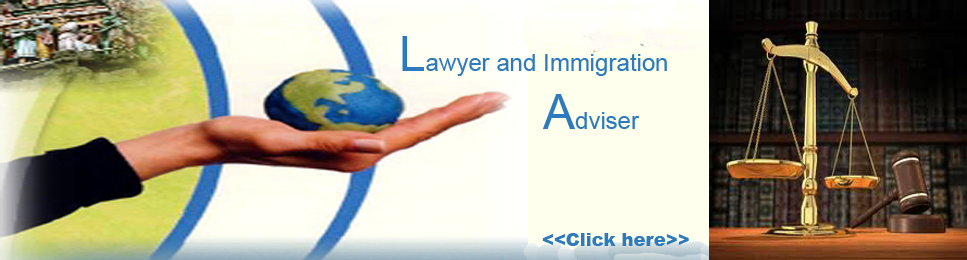
<style>
.page{position:relative;width:967px;height:260px}
.page>*{position:absolute;margin:0}
.t1{font:24px "ArialMT";color:#2d7bbe}
.t2{font:48px "ArialMT";color:#2d7bbe}
.t3{font:18px "Arial-Black";color:#2d7bbe}
</style>
<div class="page">
<p class="t1" style="left:402px;top:36px;width:265px;height:93px"><span class="t2">L</span>awyer and Immigration <br>    <span class="t2">A</span>dviser</p>
<p class="t3" style="left:542px;top:233px;width:147px;height:13px">&lt;&lt;Click here&gt;&gt;</p>
</div>
